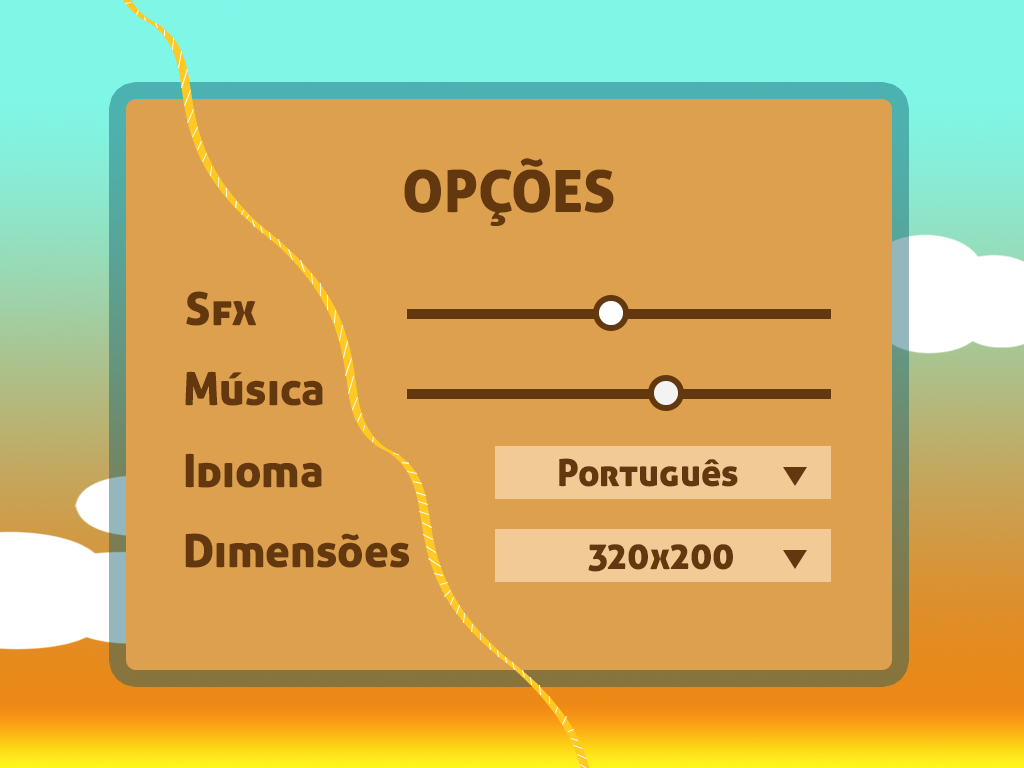
<style>
.page{position:relative;width:1024px;height:768px;background:#dda04f}
.page>*{position:absolute;margin:0}
.t1{font:58.3px "AllerDisplay";color:#64380f}
.t2{font:45.8px "AllerDisplay";color:#64380f}
.t3{font:37.5px "AllerDisplay";color:#64380f}
</style>
<div class="page">
<p class="t1" style="left:404px;top:158px;width:210px;height:68px">OPÇÕES</p>
<p class="t2" style="left:186px;top:291px;width:71px;height:35px">Sfx</p>
<p class="t2" style="left:185px;top:371px;width:138px;height:35px">Música</p>
<p class="t2" style="left:185px;top:453px;width:137px;height:35px">Idioma</p>
<p class="t3" style="left:559px;top:458px;width:179px;height:29px">Português</p>
<p class="t2" style="left:185px;top:533px;width:224px;height:35px">Dimensões</p>
<p class="t3" style="left:588px;top:544px;width:145px;height:28px">320x200</p>
</div>
